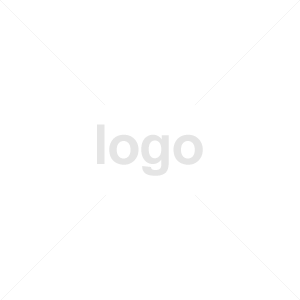
<style>
.page{position:relative;width:300px;height:300px;background:#ffffff}
.page>*{position:absolute;margin:0}
.t1{font:54.9px "Arial-BoldMT";letter-spacing:-0.025em;color:#e5e5e5}
</style>
<div class="page">
<p class="t1" style="left:97px;top:124px;width:106px;height:52px">logo</p>
</div>
